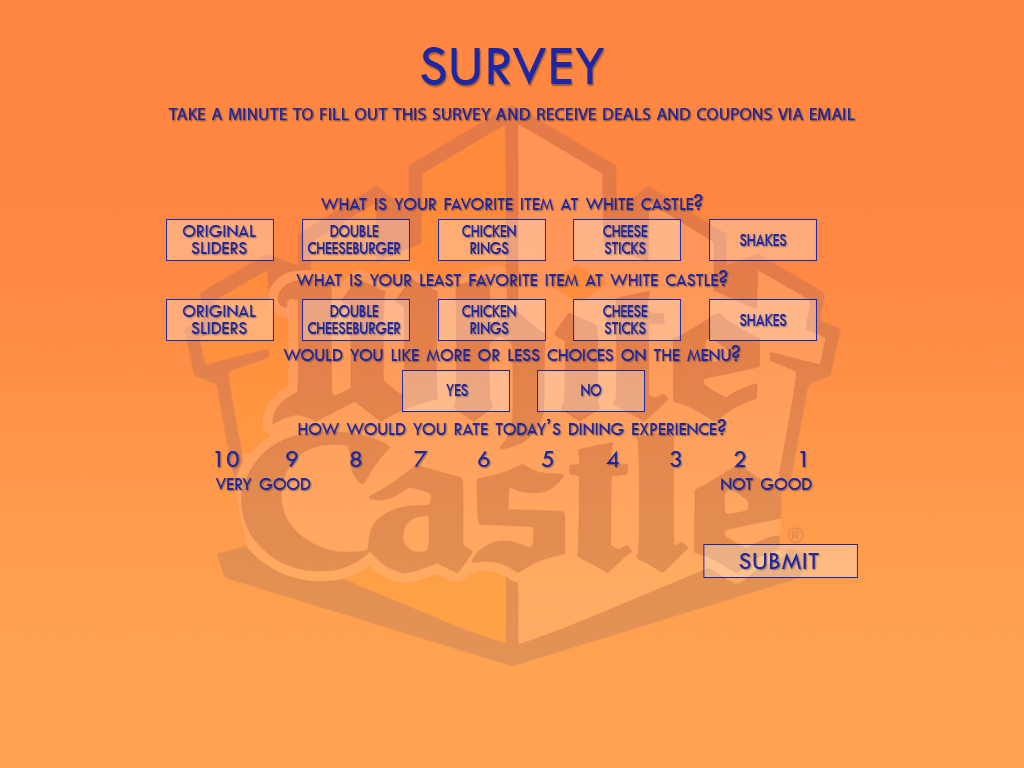
<style>
.page{position:relative;width:1024px;height:768px;background:#ff8742}
.page>*{position:absolute;margin:0}
.t1{font:57.9px "TwCenMT-Regular";letter-spacing:0.01em;color:#1a28a7;font-variant:small-caps}
.t2{font:25px "MyriadPro-Regular";letter-spacing:0.01em;color:#1a28a7;font-variant:small-caps}
.t3{font:25px "TwCenMT-Regular";letter-spacing:0.01em;color:#1a28a7;font-variant:small-caps}
.t4{font:25px/16.7px "TwCenMT-Regular";letter-spacing:0.01em;color:#1a28a7;font-variant:small-caps}
.t5{font:25px/16.7px "TwCenMT-Regular";letter-spacing:0.01em;color:#1a28a7;font-variant:small-caps;scale:0.83 1}
.t6{font:25px "TwCenMT-Regular";letter-spacing:0.01em;color:#1a28a7;font-variant:small-caps;scale:0.83 1}
.t7{font:37.5px "TwCenMT-Regular";letter-spacing:0.01em;color:#1a28a7;font-variant:small-caps}
</style>
<div class="page">
<p class="t1" style="left:421px;top:47px;width:184px;height:38px">SURVEY</p>
<p class="t2" style="left:168px;top:108px;width:687px;height:12px">take a minute to fill out this survey and receive deals and coupons via email</p>
<p class="t3" style="left:321px;top:194px;width:382px;height:16px">what is your favorite item at white castle?</p>
<p class="t4" style="left:182px;top:225px;width:74px;height:29px;text-align:center">original<br>sliders</p>
<p class="t5" style="left:307px;top:225px;width:94px;height:29px;text-align:center">double<br>cheeseburger</p>
<p class="t5" style="left:462px;top:225px;width:54px;height:29px;text-align:center">chicken<br>rings</p>
<p class="t5" style="left:603px;top:225px;width:45px;height:29px;text-align:center">cheese<br>sticks</p>
<p class="t6" style="left:739px;top:234px;width:48px;height:12px">shakes</p>
<p class="t3" style="left:296px;top:270px;width:432px;height:16px">what is your least favorite item at white castle?</p>
<p class="t4" style="left:182px;top:305px;width:74px;height:29px;text-align:center">original<br>sliders</p>
<p class="t5" style="left:307px;top:305px;width:94px;height:29px;text-align:center">double<br>cheeseburger</p>
<p class="t5" style="left:462px;top:305px;width:54px;height:29px;text-align:center">chicken<br>rings</p>
<p class="t5" style="left:603px;top:305px;width:45px;height:29px;text-align:center">cheese<br>sticks</p>
<p class="t6" style="left:739px;top:314px;width:48px;height:12px">shakes</p>
<p class="t3" style="left:283px;top:345px;width:457px;height:16px">would you like more or less choices on the menu?</p>
<p class="t6" style="left:446px;top:384px;width:22px;height:12px">yes</p>
<p class="t6" style="left:581px;top:384px;width:21px;height:12px">no</p>
<p class="t3" style="left:298px;top:419px;width:428px;height:16px">how would you rate today’s dining experience?</p>
<p class="t3" style="left:215px;top:451px;width:24px;height:16px">10</p>
<p class="t3" style="left:286px;top:451px;width:12px;height:16px">9</p>
<p class="t3" style="left:350px;top:451px;width:12px;height:16px">8</p>
<p class="t3" style="left:414px;top:451px;width:14px;height:16px">7</p>
<p class="t3" style="left:478px;top:451px;width:12px;height:16px">6</p>
<p class="t3" style="left:541px;top:451px;width:12px;height:16px">5</p>
<p class="t3" style="left:606px;top:450px;width:13px;height:17px">4</p>
<p class="t3" style="left:670px;top:451px;width:12px;height:16px">3</p>
<p class="t3" style="left:734px;top:451px;width:12px;height:16px">2</p>
<p class="t3" style="left:800px;top:451px;width:6px;height:16px">1</p>
<p class="t3" style="left:215px;top:478px;width:96px;height:12px">very good</p>
<p class="t3" style="left:721px;top:478px;width:91px;height:12px">not good</p>
<p class="t7" style="left:739px;top:553px;width:80px;height:16px">submit</p>
</div>
